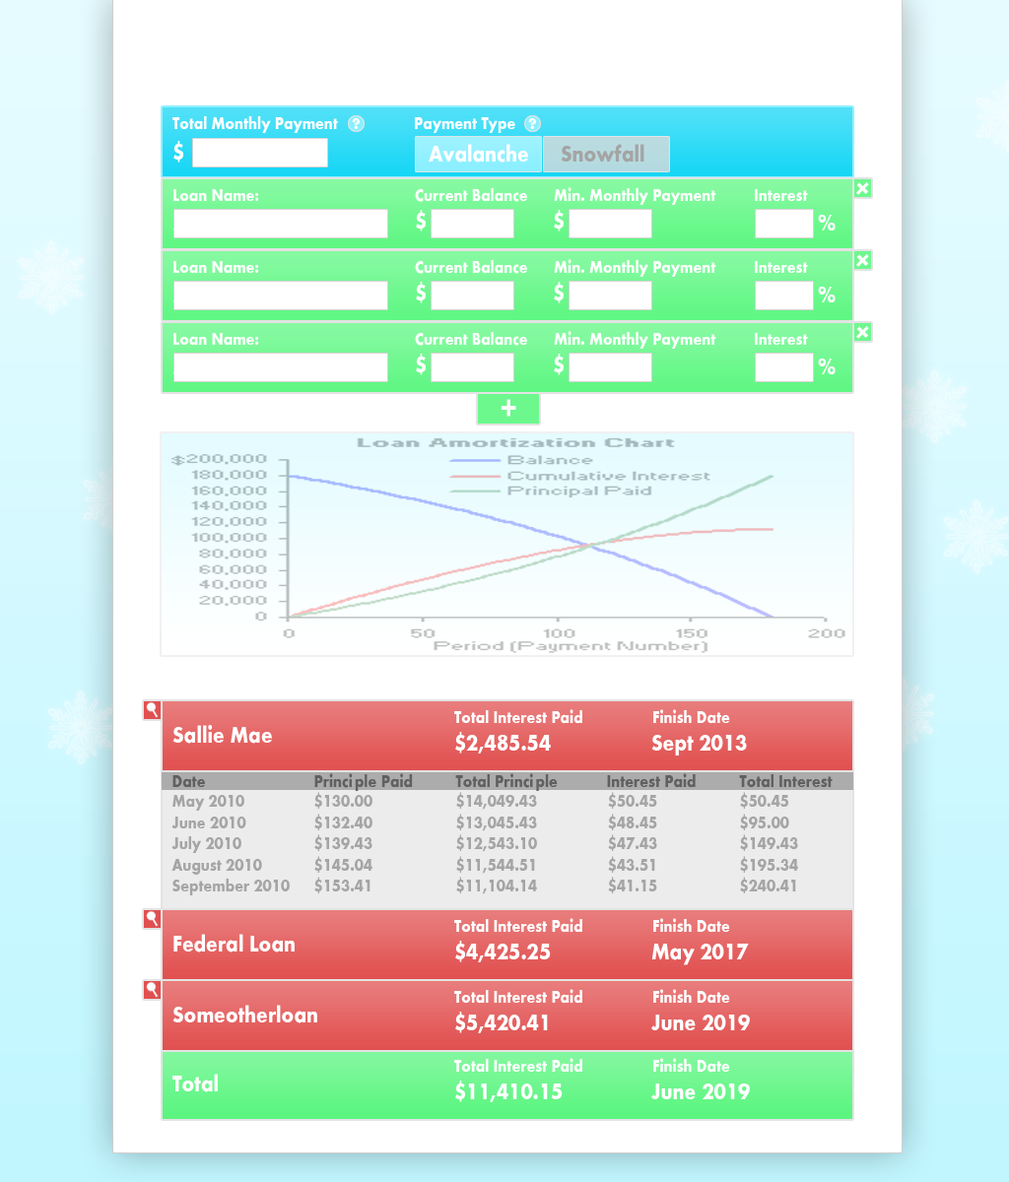
<style>
.page{position:relative;width:1009px;height:1182px;background:#ffffff}
.page>*{position:absolute;margin:0}
.t1{font:17.7px "FuturaCnd-Bold";color:#ffffff}
.t2{font:15.8px "Futura-Bold";color:#ffffff}
.t3{font:23.6px "FuturaCnd-Bold";color:#ffffff}
.t4{font:23.6px "FuturaCnd-Bold";color:#a4a4a4}
.t5{font:31.3px "FuturaCnd-Bold";color:#ffffff}
.t6{font:35.5px "FuturaCnd-Bold";color:#ffffff}
.t7{font:17.7px "FuturaCnd-Bold";color:#606060}
.t8{font:17.7px "FuturaCnd-Bold";color:#a5a5a5}
</style>
<div class="page">
<p class="t1" style="left:172px;top:116px;width:166px;height:17px">Total Monthly Payment</p>
<p class="t2" style="left:352px;top:118px;width:9px;height:11px">?</p>
<p class="t1" style="left:415px;top:117px;width:100px;height:16px">Payment Type</p>
<p class="t2" style="left:528px;top:118px;width:9px;height:11px">?</p>
<p class="t3" style="left:173px;top:141px;width:11px;height:22px">$</p>
<p class="t3" style="left:429px;top:144px;width:99px;height:19px">Avalanche</p>
<p class="t4" style="left:561px;top:144px;width:83px;height:19px">Snowfall</p>
<p class="t5" style="left:856px;top:182px;width:13px;height:13px;rotate:45deg">+</p>
<p class="t1" style="left:173px;top:189px;width:86px;height:13px">Loan Name:</p>
<p class="t1" style="left:415px;top:188px;width:112px;height:14px">Current Balance</p>
<p class="t1" style="left:554px;top:187px;width:162px;height:18px">Min. Monthly Payment</p>
<p class="t1" style="left:755px;top:189px;width:53px;height:12px">Interest</p>
<p class="t3" style="left:416px;top:210px;width:11px;height:21px">$</p>
<p class="t3" style="left:554px;top:210px;width:10px;height:21px">$</p>
<p class="t3" style="left:818px;top:215px;width:17px;height:16px">%</p>
<p class="t5" style="left:856px;top:254px;width:13px;height:13px;rotate:45deg">+</p>
<p class="t1" style="left:173px;top:261px;width:86px;height:13px">Loan Name:</p>
<p class="t1" style="left:415px;top:260px;width:112px;height:14px">Current Balance</p>
<p class="t1" style="left:554px;top:259px;width:162px;height:18px">Min. Monthly Payment</p>
<p class="t1" style="left:755px;top:261px;width:53px;height:12px">Interest</p>
<p class="t3" style="left:416px;top:282px;width:11px;height:21px">$</p>
<p class="t3" style="left:554px;top:282px;width:10px;height:21px">$</p>
<p class="t3" style="left:818px;top:287px;width:17px;height:15px">%</p>
<p class="t5" style="left:856px;top:326px;width:13px;height:13px;rotate:45deg">+</p>
<p class="t1" style="left:173px;top:333px;width:86px;height:13px">Loan Name:</p>
<p class="t1" style="left:415px;top:332px;width:112px;height:14px">Current Balance</p>
<p class="t1" style="left:554px;top:331px;width:162px;height:18px">Min. Monthly Payment</p>
<p class="t1" style="left:755px;top:333px;width:53px;height:12px">Interest</p>
<p class="t3" style="left:416px;top:354px;width:11px;height:21px">$</p>
<p class="t3" style="left:554px;top:354px;width:10px;height:21px">$</p>
<p class="t3" style="left:818px;top:359px;width:17px;height:15px">%</p>
<p class="t6" style="left:500px;top:399px;width:16px;height:18px">+</p>
<p class="t1" style="left:454px;top:709px;width:128px;height:15px">Total Interest Paid</p>
<p class="t1" style="left:653px;top:709px;width:77px;height:15px">Finish Date</p>
<p class="t3" style="left:172px;top:725px;width:100px;height:19px">Sallie Mae</p>
<p class="t3" style="left:455px;top:732px;width:96px;height:22px">$2,485.54</p>
<p class="t3" style="left:651px;top:735px;width:96px;height:21px">Sept 2013</p>
<p class="t7" style="left:172px;top:773px;width:660px;height:18px">Date    Principle Paid  Total Principle                Interest Paid    Total Interest</p>
<p class="t8" style="left:171px;top:792px;width:627px;height:103px">May 2010  $130.00   $14,049.43     $50.45   $50.45<br>June 2010  $132.40   $13,045.43     $48.45   $95.00<br>July 2010   $139.43   $12,543.10     $47.43   $149.43<br>August 2010  $145.04   $11,544.51     $43.51   $195.34<br>September 2010 $153.41   $11,104.14     $41.15   $240.41</p>
<p class="t1" style="left:454px;top:918px;width:128px;height:15px">Total Interest Paid</p>
<p class="t1" style="left:653px;top:918px;width:77px;height:15px">Finish Date</p>
<p class="t3" style="left:173px;top:934px;width:122px;height:19px">Federal Loan</p>
<p class="t3" style="left:455px;top:941px;width:96px;height:21px">$4,425.25</p>
<p class="t3" style="left:651px;top:944px;width:98px;height:21px">May 2017</p>
<p class="t1" style="left:454px;top:989px;width:128px;height:15px">Total Interest Paid</p>
<p class="t1" style="left:653px;top:989px;width:77px;height:15px">Finish Date</p>
<p class="t3" style="left:172px;top:1005px;width:145px;height:19px">Someotherloan</p>
<p class="t3" style="left:455px;top:1012px;width:93px;height:21px">$5,420.41</p>
<p class="t3" style="left:651px;top:1015px;width:99px;height:15px">June 2019</p>
<p class="t1" style="left:454px;top:1058px;width:128px;height:15px">Total Interest Paid</p>
<p class="t1" style="left:653px;top:1058px;width:77px;height:15px">Finish Date</p>
<p class="t3" style="left:172px;top:1074px;width:46px;height:18px">Total</p>
<p class="t3" style="left:455px;top:1081px;width:107px;height:21px">$11,410.15</p>
<p class="t3" style="left:651px;top:1084px;width:99px;height:15px">June 2019</p>
</div>
